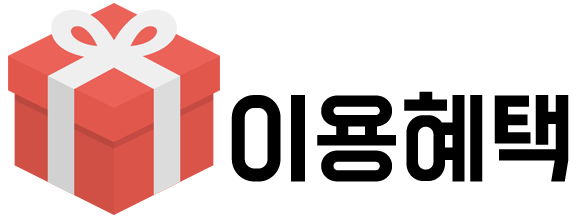
<style>
.page{position:relative;width:576px;height:216px;background:#ffffff}
.page>*{position:absolute;margin:0}
.t1{font:91.4px "BMDoHyeon";color:#000000}
</style>
<div class="page">
<p class="t1" style="left:231px;top:91px;width:338px;height:91px">이용혜택</p>
</div>
